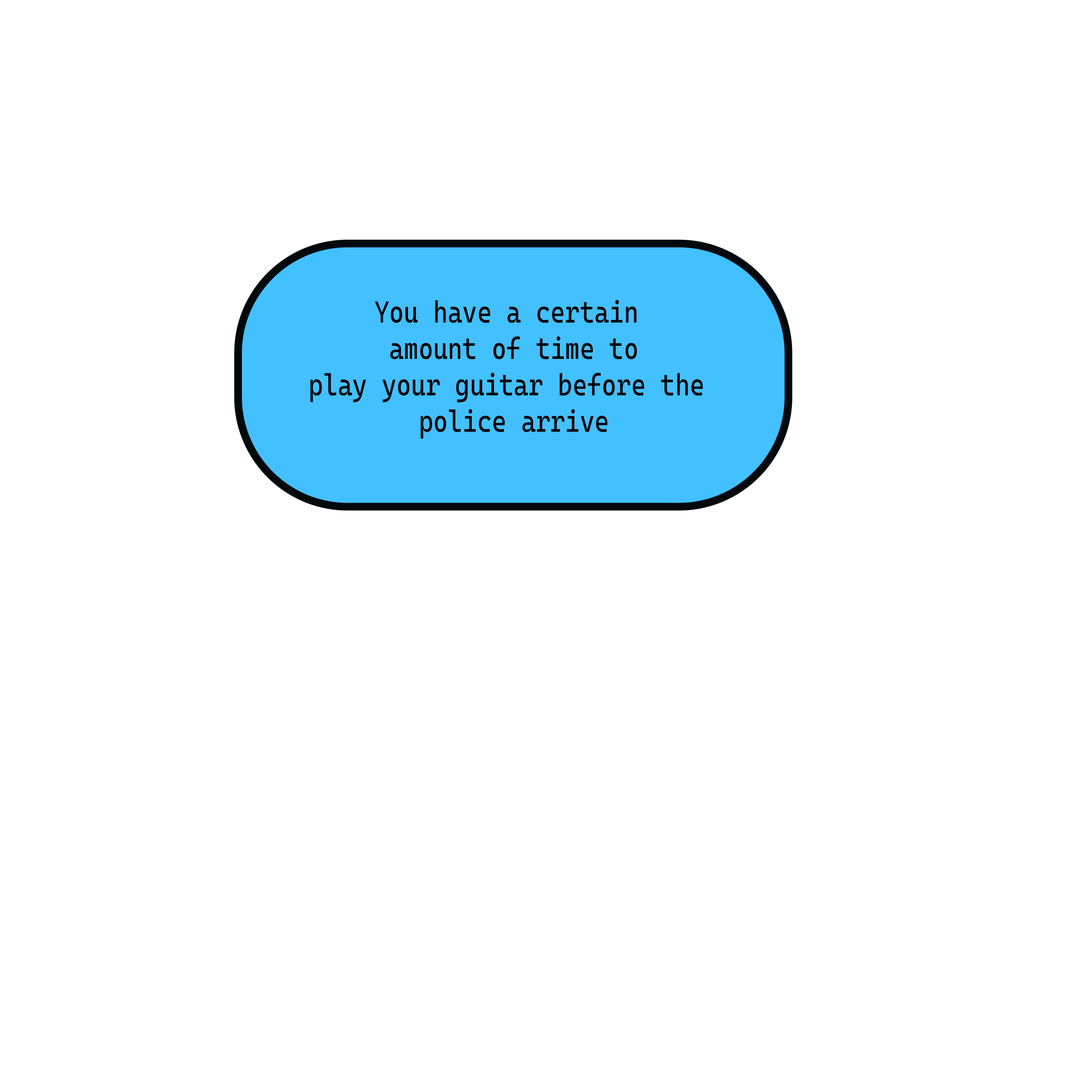
<style>
.page{position:relative;width:1092px;height:1092px;background:#ffffff}
.page>*{position:absolute;margin:0}
.t1{font:30.3px "CascadiaCode-Regular";color:#010000;scale:0.83 1}
</style>
<div class="page">
<p class="t1" style="left:310px;top:300px;width:393px;height:139px;text-align:center">You have a certain <br>amount of time to<br>play your guitar before the <br>police arrive</p>
</div>
